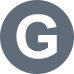
<style>
.page{position:relative;width:74px;height:74px;background:#606d78}
.page>*{position:absolute;margin:0}
.t1{font:60px "Arial-BoldMT";color:#ffffff}
</style>
<div class="page">
<p class="t1" style="left:16px;top:14px;width:41px;height:45px">G</p>
</div>
